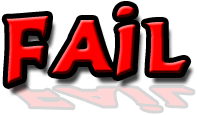
<style>
.page{position:relative;width:197px;height:115px;background:#ffffff}
.page>*{position:absolute;margin:0}
.t1{font:120px "300Trojans"}
</style>
<div class="page">
<p class="t1" style="left:6px;top:6px;width:181px;height:78px">f  a  i   l</p>
</div>
